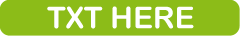
<style>
.page{position:relative;width:240px;height:36px;background:#8cbc18}
.page>*{position:absolute;margin:0}
.t1{font:30px "ArialRoundedMTBold";color:#ffffff}
</style>
<div class="page">
<p class="t1" style="left:47px;top:6px;width:147px;height:23px">TXT HERE</p>
</div>
